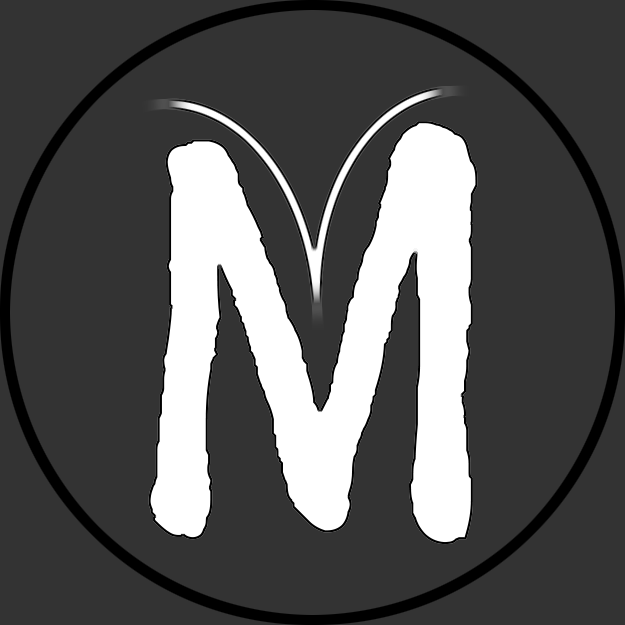
<style>
.page{position:relative;width:625px;height:625px;background:#333333}
.page>*{position:absolute;margin:0}
.t1{font:585.4px "FZDCJW--GB1-0";color:#ffffff;font-weight:bold}
</style>
<div class="page">
<p class="t1" style="left:148px;top:121px;width:330px;height:424px">M</p>
</div>
